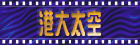
<style>
.page{position:relative;width:140px;height:45px}
.page>*{position:absolute;margin:0}
.t1{font:29.5px "JetLink-MediumRoundArt";scale:0.54 1}
</style>
<div class="page">
<p class="t1" style="left:39px;top:10px;width:62px;height:26px">港大太空</p>
</div>
